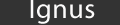
<style>
.page{position:relative;width:120px;height:25px;background:#333333}
.page>*{position:absolute;margin:0}
.t1{font:28px "MyriadPro-Regular";letter-spacing:0.02em;color:#fcfbfb}
</style>
<div class="page">
<p class="t1" style="left:30px;top:0px;width:65px;height:24px">Ignus</p>
</div>
